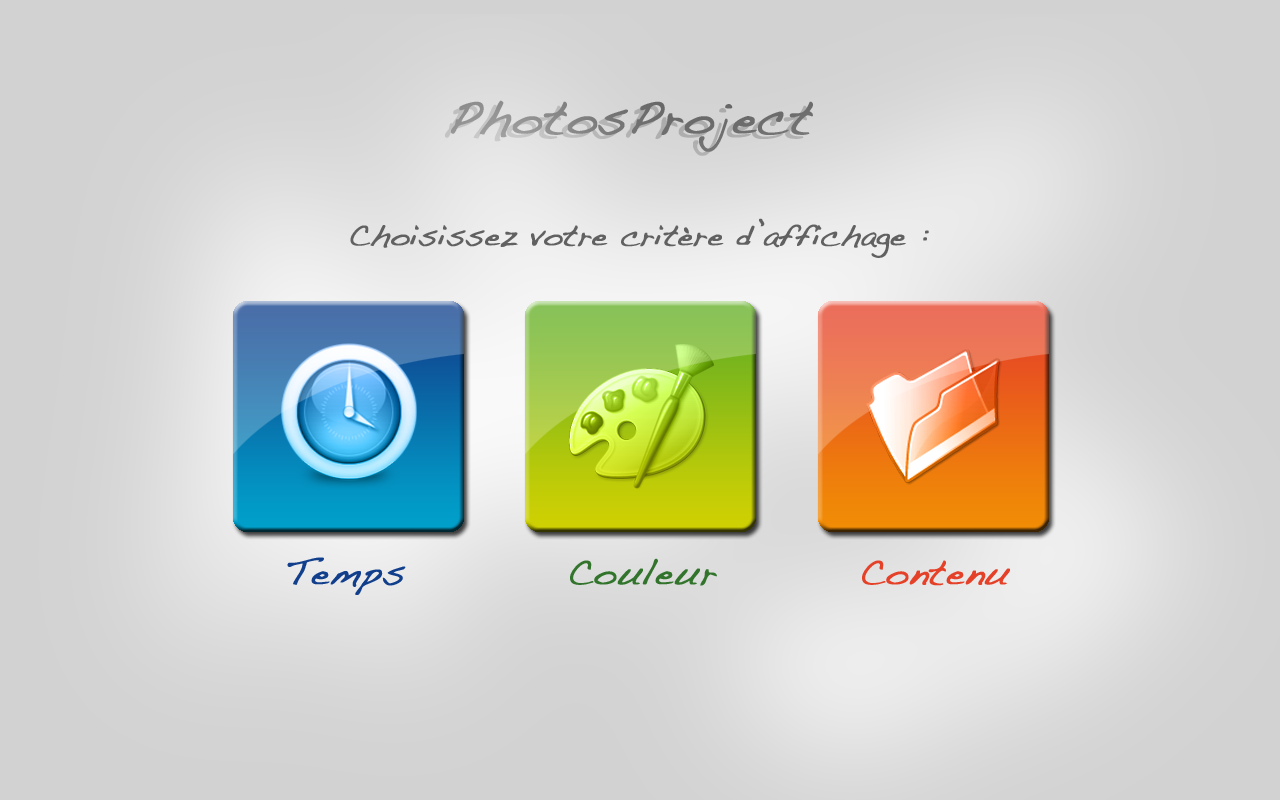
<style>
.page{position:relative;width:1280px;height:800px}
.page>*{position:absolute;margin:0}
.t1{font:48px "Handwriting-Dakota";font-weight:bold}
.t2{font:30px "Handwriting-Dakota";color:#616161;font-weight:bold}
.t3{font:36px "Handwriting-Dakota";color:#113f8c;font-weight:bold}
.t4{font:36px "Handwriting-Dakota";color:#32742c;font-weight:bold}
.t5{font:36px "Handwriting-Dakota";color:#e54028;font-weight:bold}
</style>
<div class="page">
<p class="t1" style="left:451px;top:100px;width:362px;height:52px">PhotosProject</p>
<p class="t1" style="left:445px;top:104px;width:362px;height:52px">PhotosProject</p>
<p class="t2" style="left:350px;top:218px;width:579px;height:40px">Choisissez votre critère d’affichage :</p>
<p class="t3" style="left:287px;top:557px;width:119px;height:38px">Temps</p>
<p class="t4" style="left:570px;top:558px;width:147px;height:28px">Couleur</p>
<p class="t5" style="left:862px;top:560px;width:148px;height:26px">Contenu</p>
</div>
